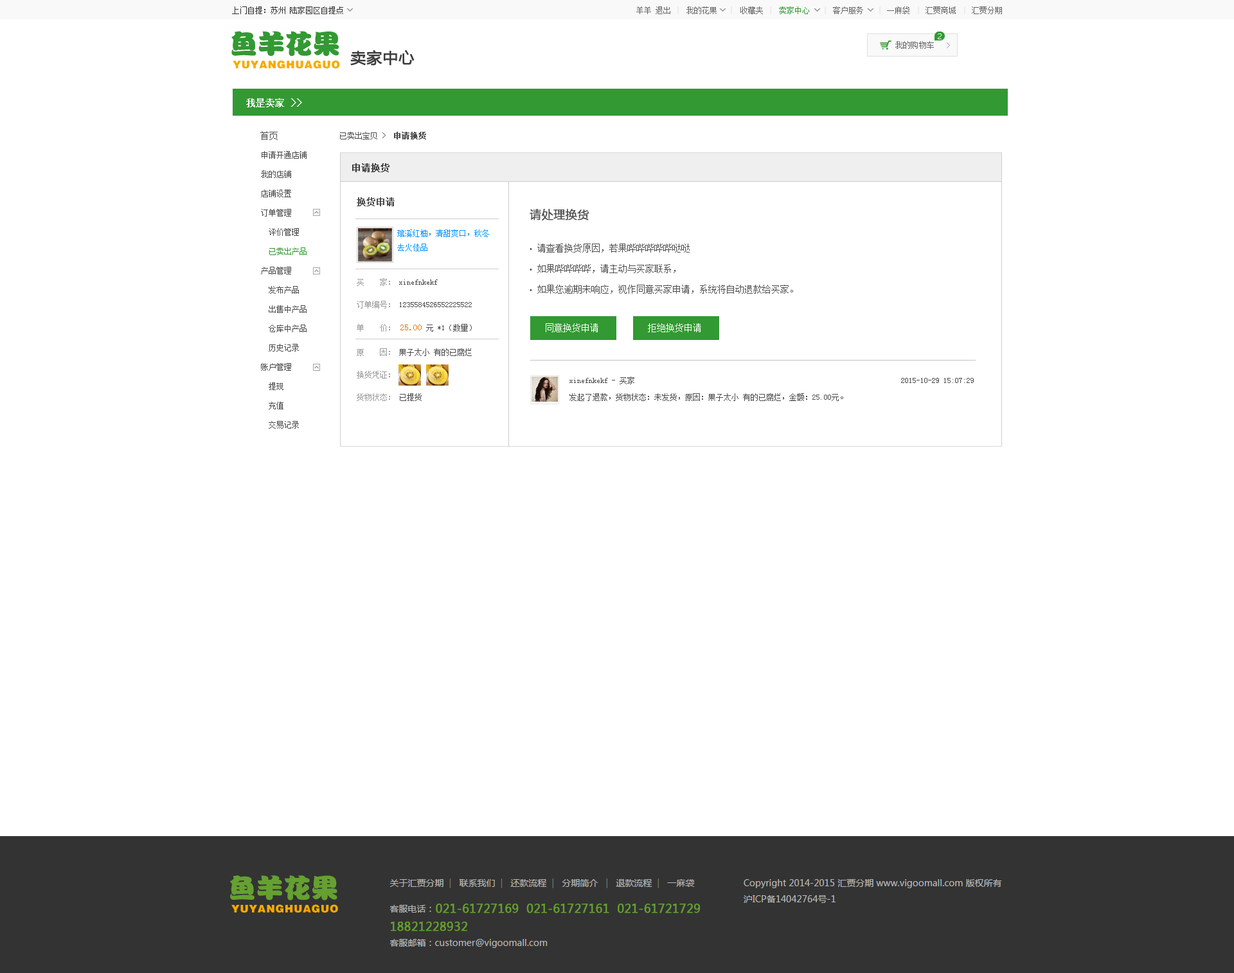
<style>
.page{position:relative;width:1234px;height:973px;background:#ffffff}
.page>*{position:absolute;margin:0}
.t1{font:9px "SimSun";color:#4b4b4b}
.t2{font:7.7px "SimSun";color:#4b4b4b}
.t3{font:7.7px "SimSun";color:#4b4b4b;font-weight:bold}
.t4{font:7.7px/19.3px "SimSun";color:#4b4b4b}
.t5{font:7.7px/19.3px "SimSun";color:#339933}
.t6{font:9px "SimSun";color:#3e3e3e;font-weight:bold}
.t7{font:9px "SimSun";color:#4b4b4b;font-weight:bold}
.t8{font:11.6px "MicrosoftYaHei";color:#4b4b4b;font-weight:bold}
.t9{font:7.7px/14.1px "SimSun";color:#0094ff}
.t10{font:9px/20.6px "SimSun";color:#4b4b4b}
.t11{font:11.6px/20.6px "AdobeHeitiStd-Regular";color:#4b4b4b}
.t12{font:7.7px/22.5px "SimSun";color:#4b4b4b}
.t13{font:7.7px/22.5px "SimSun";color:#9a9a9a}
.t14{font:7.7px/25.1px "SimSun";color:#9a9a9a}
.t15{font:9px/25.1px "SimSun";color:#ee7000}
.t16{font:7.7px/25.1px "SimSun";color:#4b4b4b}
.t17{font:9px "SimSun";color:#ffffff}
.t18{font:7.7px/16.7px "SimSun";color:#4b4b4b}
</style>
<div class="page">
<p class="t1" style="left:260px;top:131px;width:18px;height:9px">首页</p>
<p class="t2" style="left:340px;top:132px;width:86px;height:8px">已卖出宝贝 〉 <span class="t3">申请换货</span></p>
<p class="t4" style="left:261px;top:151px;width:46px;height:278px">申请开通店铺<br>我的店铺<br>店铺设置<br>订单管理<br>  评价管理<br><span class="t5">  已卖出产品<br></span>产品管理<br>  发布产品<br>  出售中产品<br>  仓库中产品<br>  历史记录<br>账户管理<br>  提现<br>  充值<br>  交易记录</p>
<p class="t6" style="left:352px;top:163px;width:38px;height:9px">申请换货</p>
<p class="t7" style="left:357px;top:197px;width:38px;height:9px">换货申请</p>
<p class="t8" style="left:530px;top:209px;width:59px;height:12px">请处理换货</p>
<p class="t9" style="left:397px;top:230px;width:92px;height:21px">琯溪红柚，清甜爽口，秋冬<br>去火佳品</p>
<p class="t10" style="left:537px;top:244px;width:256px;height:50px">请查看换货原因，若果哔哔哔哔哔哒哒<br>如果哔哔哔哔，请主动与买家联系，<br>如果您逾期未响应，视作同意买家申请，系统将自动退款给买家。</p>
<p class="t11" style="left:530px;top:248px;width:2px;height:43px">.<br>.<br>.</p>
<p class="t12" style="left:357px;top:278px;width:115px;height:123px"><span class="t13">买    家：</span> xinefnkekf<br><span class="t13">订单编号：</span> 1235584526552225522<br><span class="t14">单    价： </span><span class="t15">25.00</span><span class="t16"> 元 *1（数量）<br></span><span class="t13">原    因：</span> 果子太小 有的已腐烂<br><span class="t13">换货凭证：<br>货物状态：</span> 已提货</p>
<p class="t17" style="left:546px;top:323px;width:52px;height:9px">同意换货申请</p>
<p class="t17" style="left:648px;top:323px;width:53px;height:9px">拒绝换货申请</p>
<p class="t18" style="left:570px;top:377px;width:404px;height:24px">xinefnkekf - 买家                                                                     2015-10-29 15:07:29<br>发起了退款，货物状态：未发货，原因：<span class="t12">果子太小 有的已腐烂</span>，金额：25.00元。</p>
</div>
